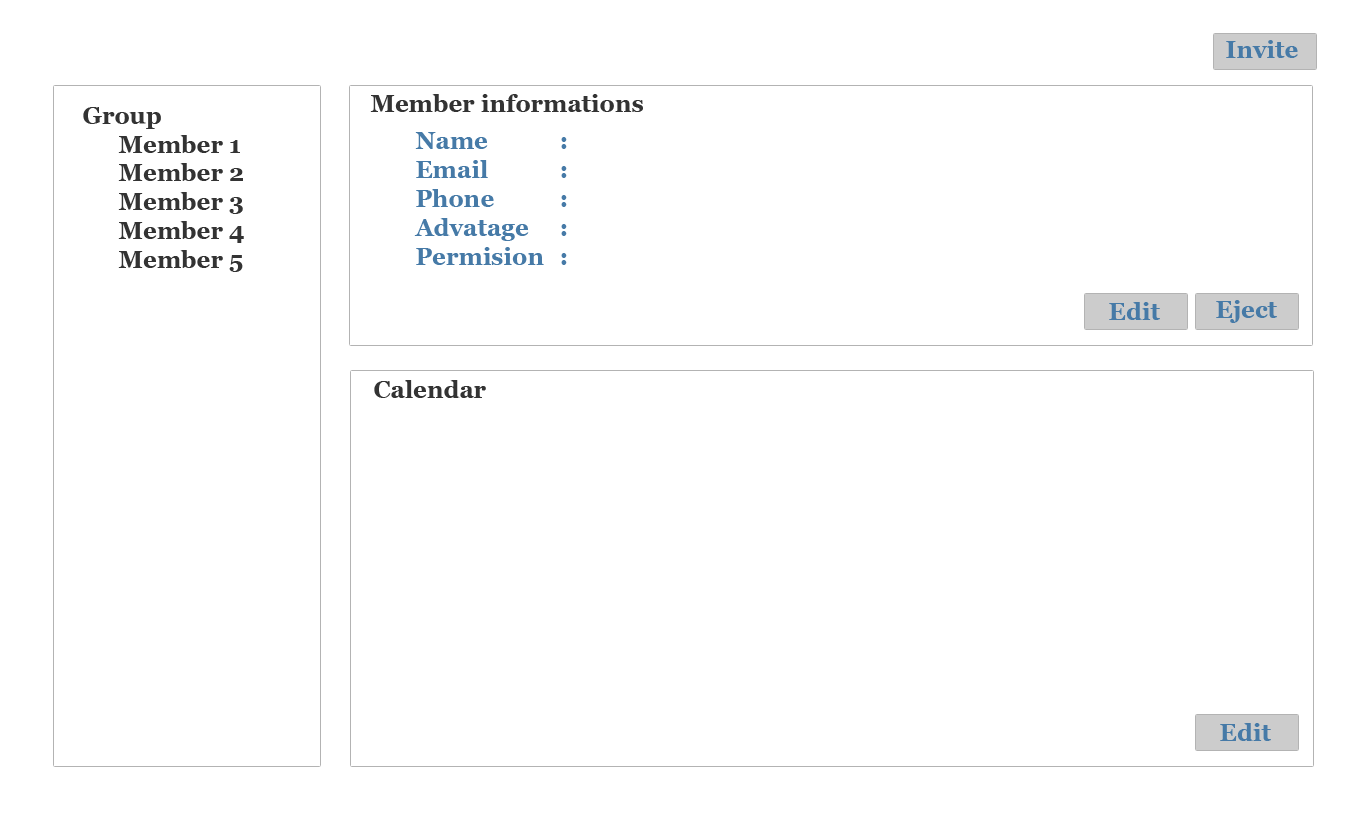
<style>
.page{position:relative;width:1366px;height:824px;background:#ffffff}
.page>*{position:absolute;margin:0}
.t1{font:24px "Vani-Bold";color:#467aa7}
.t2{font:24px "Vani-Bold";color:#333333}
</style>
<div class="page">
<p class="t1" style="left:1226px;top:40px;width:72px;height:18px">Invite</p>
<p class="t2" style="left:370px;top:94px;width:273px;height:18px">Member informations</p>
<p class="t2" style="left:83px;top:107px;width:161px;height:165px">Group<br> Member 1<br> Member 2<br> Member 3<br> Member 4<br> Member 5</p>
<p class="t1" style="left:414px;top:132px;width:153px;height:133px">Name   :<br>Email   : <br>Phone   :<br>Advatage  :<br>Permision  :</p>
<p class="t1" style="left:1109px;top:302px;width:51px;height:18px">Edit</p>
<p class="t1" style="left:1216px;top:300px;width:61px;height:23px">Eject</p>
<p class="t2" style="left:374px;top:380px;width:112px;height:18px">Calendar</p>
<p class="t1" style="left:1220px;top:723px;width:51px;height:18px">Edit</p>
</div>
